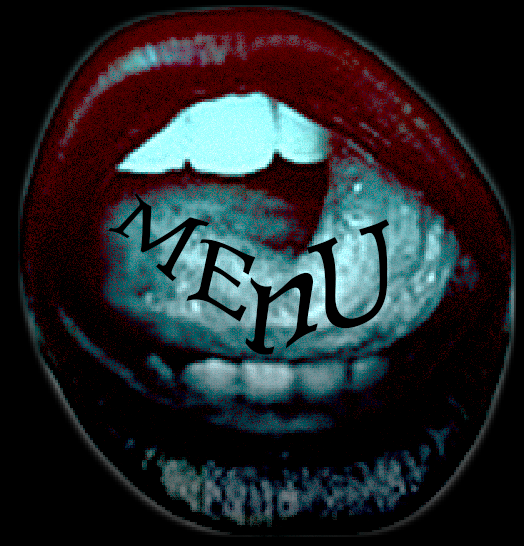
<style>
.page{position:relative;width:524px;height:546px;background:#000000}
.page>*{position:absolute;margin:0}
.t1{font:84.4px "Alegreya-Regular";letter-spacing:0.2em;color:#000000;scale:1.31 1}
.t2{font:139.8px "Alegreya-Regular";letter-spacing:0.2em;color:#000000}
.t3{font:99px "Alegreya-Regular";letter-spacing:0.2em;color:#000000;scale:1.28 1}
.t4{font:148px "Alegreya-Regular";letter-spacing:0.2em;color:#000000}
</style>
<div class="page">
<p class="t1" style="left:107px;top:193px;width:103px;height:89px;rotate:32deg">M</p>
<p class="t2" style="left:306px;top:219px;width:84px;height:110px;rotate:-19deg">U</p>
<p class="t3" style="left:186px;top:239px;width:70px;height:83px;rotate:12deg">E</p>
<p class="t4" style="left:245px;top:272px;width:73px;height:83px;rotate:12deg">n</p>
</div>
